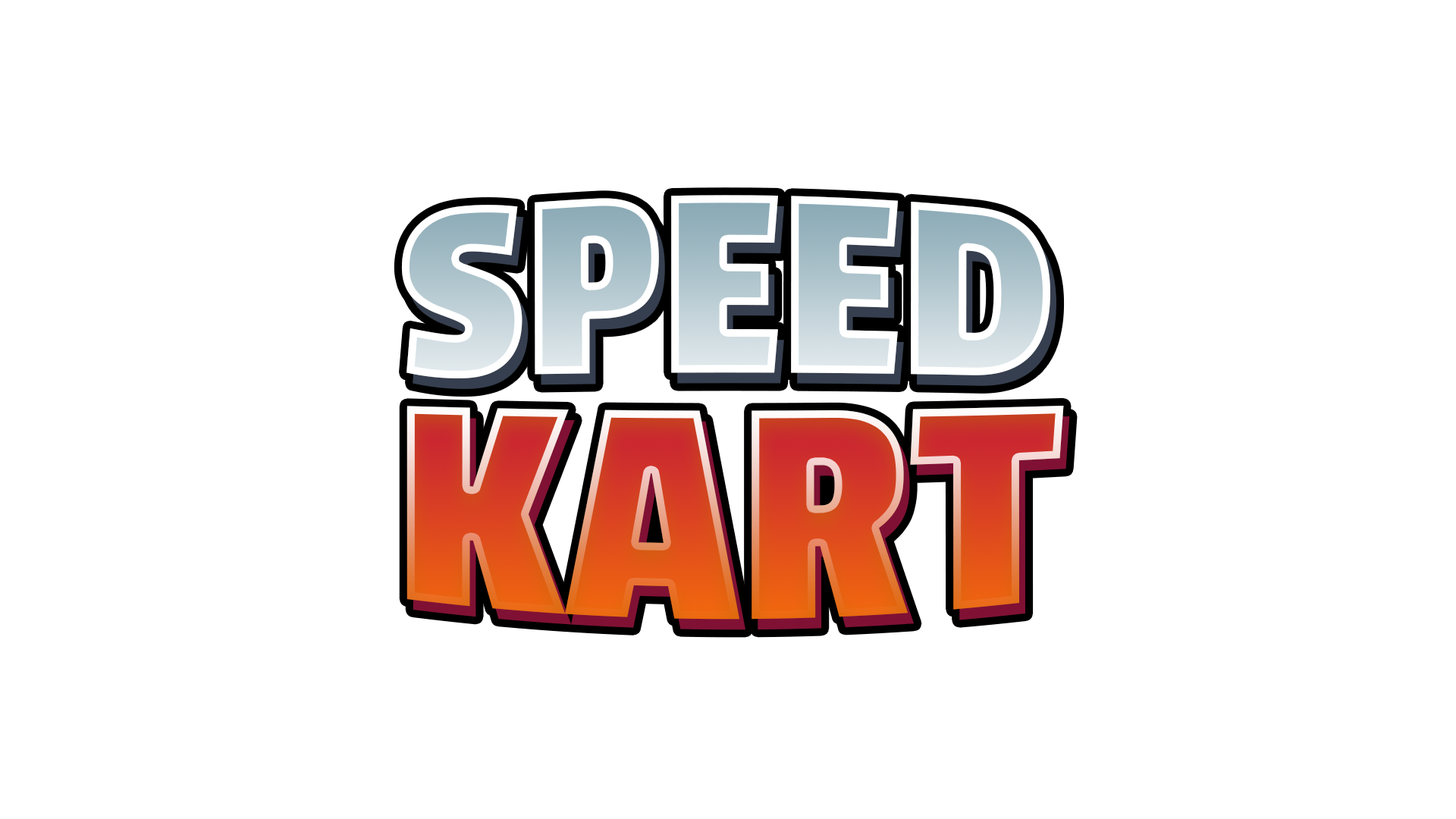
<style>
.page{position:relative;width:1456px;height:819px;background:#ffffff}
.page>*{position:absolute;margin:0}
.t1{font:259.4px "PassionOne-Bold"}
.t2{font:308.7px "PassionOne-Bold"}
</style>
<div class="page">
<p class="t1" style="left:401px;top:195px;width:649px;height:183px">SPEED</p>
<p class="t2" style="left:406px;top:406px;width:658px;height:214px">KART</p>
</div>
